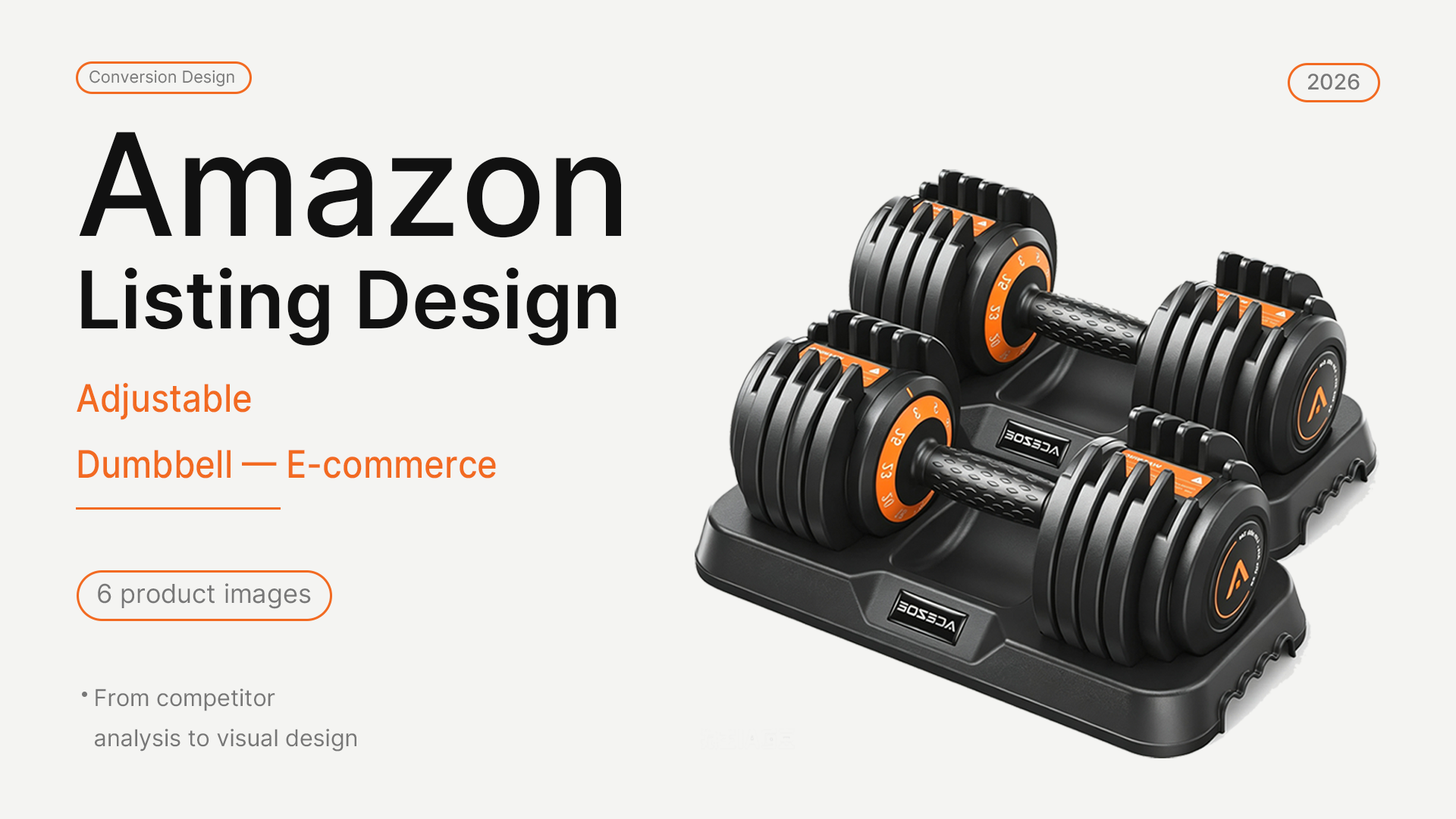
<style>
.page{position:relative;width:1456px;height:819px;background:#f4f4f2}
.page>*{position:absolute;margin:0}
.t1{font:16.5px "Inter-Regular";color:#777777}
.t2{font:21.3px "Inter-Medium";color:#777777}
.t3{font:142.3px "Inter-Medium";color:#111111}
.t4{font:79.5px "Inter-SemiBold";color:#111111}
.t5{font:38.1px "Inter-Medium";color:#f26a21;scale:0.91 1}
.t6{font:26px "Inter-Regular";color:#777777}
.t7{font:23.1px "Inter-Regular";color:#777777}
</style>
<div class="page">
<p class="t1" style="left:89px;top:70px;width:145px;height:16px">Conversion Design</p>
<p class="t2" style="left:1308px;top:74px;width:52px;height:16px">2026</p>
<p class="t3" style="left:79px;top:132px;width:542px;height:106px">Amazon</p>
<p class="t4" style="left:81px;top:267px;width:536px;height:79px">Listing Design</p>
<p class="t5" style="left:77px;top:383px;width:419px;height:96px">Adjustable <br>Dumbbell — E-commerce</p>
<p class="t6" style="left:98px;top:583px;width:213px;height:26px">6 product images</p>
<p class="t7" style="left:95px;top:689px;width:261px;height:62px">From competitor <br>analysis to visual design</p>
</div>
